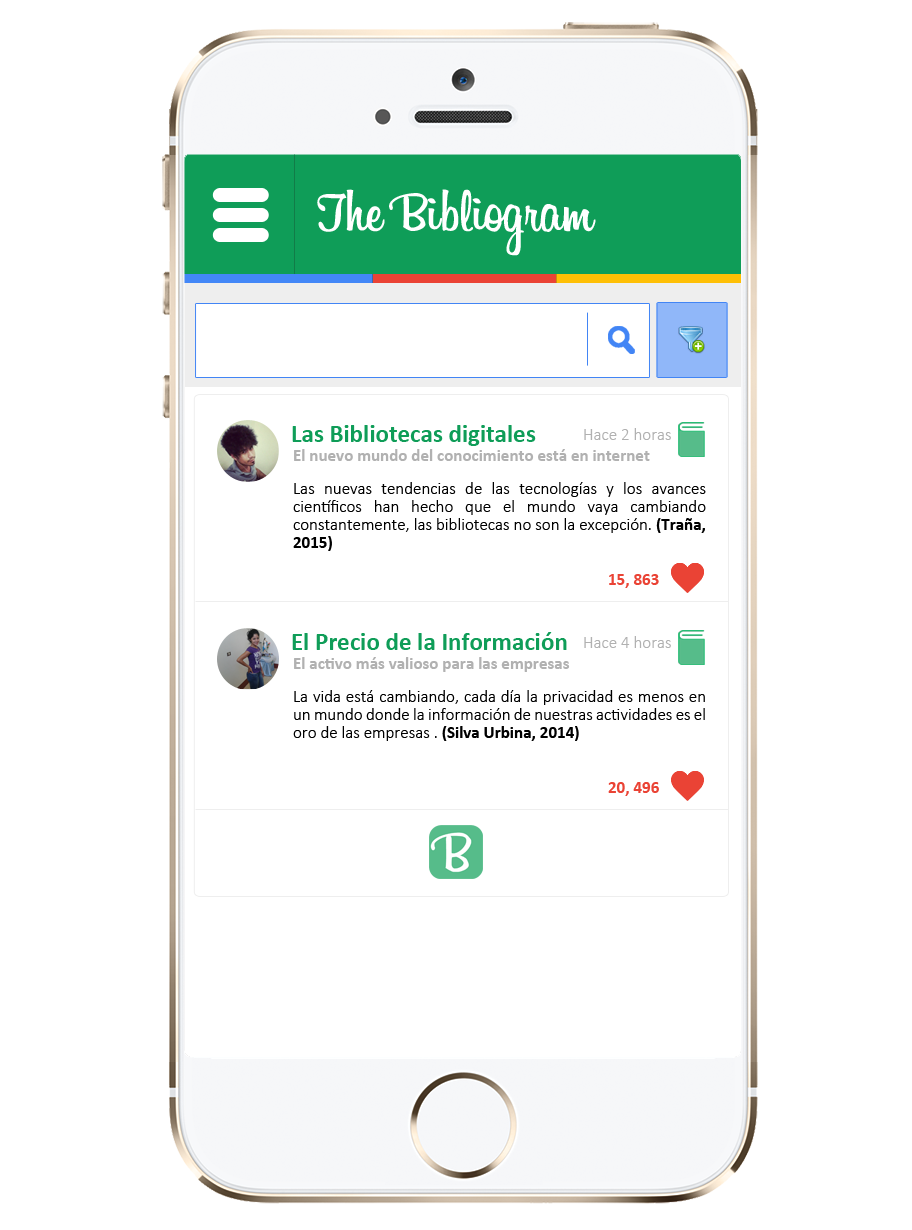
<style>
.page{position:relative;width:912px;height:1230px;background:#ffffff}
.page>*{position:absolute;margin:0}
.t1{font:60px "Billabong";color:#ffffff}
.t2{font:25px "Calibri-Bold";color:#0f9d58}
.t3{font:17px "Calibri-Light";color:#b1b1b1}
.t4{font:17px "Calibri-Bold";color:#b1b1b1}
.t5{font:17px/18px "Calibri-Light";color:#000000}
.t6{font:17px/18px "Calibri-Bold";color:#000000}
.t7{font:17px "Calibri-Bold";color:#ea4335}
</style>
<div class="page">
<p class="t1" style="left:317px;top:189px;width:279px;height:67px">The Bibliogram</p>
<p class="t2" style="left:292px;top:425px;width:244px;height:21px">Las Bibliotecas digitales</p>
<p class="t3" style="left:584px;top:428px;width:87px;height:12px">Hace 2 horas</p>
<p class="t4" style="left:294px;top:449px;width:356px;height:12px">El nuevo mundo del conocimiento está en internet</p>
<p class="t5" style="left:293px;top:482px;width:413px;height:69px;text-align:justify">Las nuevas tendencias de las tecnologías y los avances científicos han hecho que el mundo vaya cambiando constantemente, las bibliotecas no son la excepción. <span class="t6">(Traña, 2015)</span></p>
<p class="t7" style="left:609px;top:574px;width:50px;height:14px">15, 863</p>
<p class="t2" style="left:292px;top:632px;width:275px;height:18px">El Precio de la Información</p>
<p class="t3" style="left:584px;top:636px;width:87px;height:12px">Hace 4 horas</p>
<p class="t4" style="left:294px;top:657px;width:276px;height:15px">El activo más valioso para las empresas</p>
<p class="t5" style="left:293px;top:690px;width:412px;height:51px;text-align:justify">La vida está cambiando, cada día la privacidad es menos en un mundo donde la información de nuestras actividades es el oro de las empresas . <span class="t6">(Silva Urbina, 2014)</span></p>
<p class="t7" style="left:608px;top:782px;width:51px;height:14px">20, 496</p>
</div>
